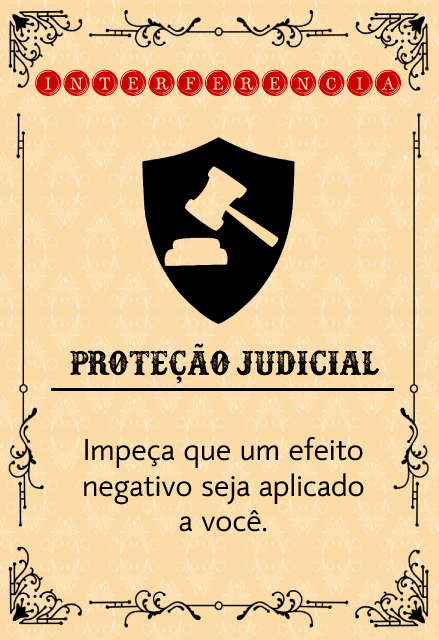
<style>
.page{position:relative;width:439px;height:640px;background:#fcdba6}
.page>*{position:absolute;margin:0}
.t1{font:35px "TypeKeysFilled";color:#cd0000}
.t2{font:38.4px "Docktrin";color:#000000}
.t3{font:29.5px "mirror82";color:#000000}
</style>
<div class="page">
<p class="t1" style="left:35px;top:69px;width:367px;height:27px">interferencia</p>
<p class="t2" style="left:70px;top:343px;width:309px;height:41px">Proteção judicial</p>
<p class="t3" style="left:84px;top:436px;width:280px;height:96px;text-align:center">Impeça que um efeito<br>negativo seja aplicado<br>a você.</p>
</div>
